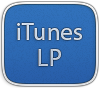
<style>
.page{position:relative;width:100px;height:88px}
.page>*{position:absolute;margin:0}
.t1{font:24px/26px "MyriadPro-Regular";letter-spacing:0.02em;color:#c9d7e7}
</style>
<div class="page">
<p class="t1" style="left:17px;top:23px;width:65px;height:43px;text-align:center">iTunes<br>LP</p>
</div>
